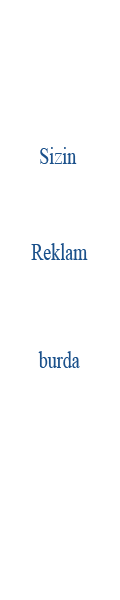
<style>
.page{position:relative;width:120px;height:600px;background:#ffffff}
.page>*{position:absolute;margin:0}
.t1{font:24px "TimesNewRomanPSMT";color:#1b518b;scale:0.75 1}
</style>
<div class="page">
<p class="t1" style="left:40px;top:147px;width:37px;height:17px">Sizin</p>
<p class="t1" style="left:31px;top:243px;width:57px;height:17px">Reklam</p>
<p class="t1" style="left:38px;top:351px;width:42px;height:17px">burda</p>
</div>
